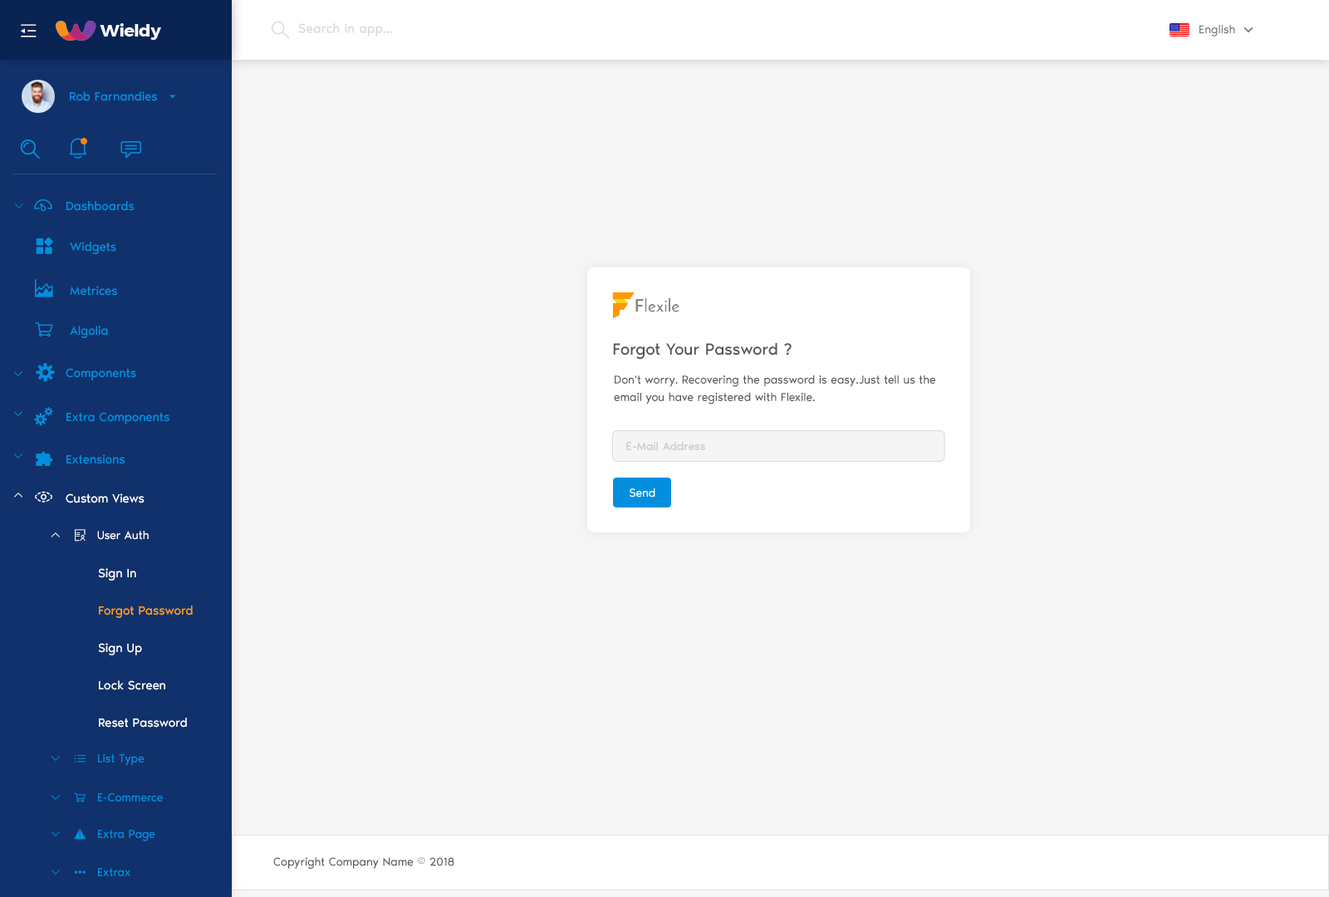
<style>
.page{position:relative;width:1329px;height:897px;background:#f6f6f6}
.page>*{position:absolute;margin:0}
.t1{font:13.3px "NoirPro-Regular";color:#d9d9d9}
.t2{font:11.6px "NoirPro-Regular";color:#757575}
.t3{font:12.5px "NoirPro-Regular";color:#038fde}
.t4{font:10px "gaxonant"}
.t5{font:18.3px "gaxonant";color:#038fde}
.t6{font:16.6px "NoirPro-Regular";color:#535353}
.t7{font:9.7px "gaxonant";color:#038fde}
.t8{font:11.6px/17.4px "NoirPro-Regular";color:#595959}
.t9{font:11.6px "NoirPro-Regular";color:#cfcfcf}
.t10{font:18.3px "gaxonant";color:#ffffff}
.t11{font:12.5px "NoirPro-Regular";color:#ffffff}
.t12{font:11.6px "NoirPro-Regular";color:#ffffff}
.t13{font:10px "gaxonant";color:#ffffff}
.t14{font:11.6px "gaxonant";color:#ffffff}
.t15{font:12.5px/33.2px "NoirPro-Regular";color:#ffffff}
.t16{font:12.5px/33.2px "NoirPro-Regular";color:#fe9e15}
.t17{font:10px "gaxonant";color:#038fde}
.t18{font:11.6px "gaxonant";color:#038fde}
.t19{font:11.6px "NoirPro-Regular";color:#038fde}
.t20{font:11.6px "NoirPro-Regular";color:#595959}
</style>
<div class="page">
<p class="t1" style="left:298px;top:23px;width:95px;height:14px">Search in app...</p>
<p class="t2" style="left:1200px;top:25px;width:35px;height:12px">English</p>
<p class="t3" style="left:70px;top:91px;width:87px;height:10px">Rob Farnandies</p>
<p class="t4" style="left:15px;top:204px;width:8px;height:5px">2</p>
<p class="t5" style="left:34px;top:199px;width:18px;height:13px">-</p>
<p class="t3" style="left:66px;top:201px;width:69px;height:10px">Dashboards</p>
<p class="t3" style="left:70px;top:242px;width:46px;height:12px">Widgets</p>
<p class="t5" style="left:35px;top:279px;width:18px;height:18px">m</p>
<p class="t3" style="left:70px;top:286px;width:47px;height:10px">Metrices</p>
<p class="t3" style="left:70px;top:326px;width:38px;height:12px">Algolia</p>
<p class="t6" style="left:613px;top:343px;width:179px;height:17px">Forgot Your Password ?</p>
<p class="t5" style="left:36px;top:363px;width:19px;height:19px">%</p>
<p class="t7" style="left:14px;top:371px;width:8px;height:5px">2</p>
<p class="t3" style="left:66px;top:368px;width:70px;height:12px">Components</p>
<p class="t8" style="left:614px;top:375px;width:321px;height:30px">Don't worry. Recovering the password is easy.Just tell us the email you have registered with Flexile.</p>
<p class="t7" style="left:14px;top:411px;width:8px;height:5px">2</p>
<p class="t3" style="left:66px;top:412px;width:103px;height:12px">Extra Components</p>
<p class="t9" style="left:626px;top:441px;width:79px;height:9px">E-Mail Address</p>
<p class="t7" style="left:14px;top:454px;width:8px;height:5px">2</p>
<p class="t3" style="left:66px;top:454px;width:59px;height:10px">Extensions</p>
<p class="t4" style="left:14px;top:493px;width:8px;height:5px">5</p>
<p class="t10" style="left:35px;top:491px;width:17px;height:12px">,</p>
<p class="t11" style="left:66px;top:493px;width:79px;height:10px">Custom Views</p>
<p class="t12" style="left:630px;top:488px;width:25px;height:10px">Send</p>
<p class="t13" style="left:51px;top:532px;width:9px;height:5px">5</p>
<p class="t14" style="left:75px;top:529px;width:11px;height:13px">r</p>
<p class="t12" style="left:97px;top:531px;width:52px;height:9px">User Auth</p>
<p class="t15" style="left:98px;top:568px;width:95px;height:160px">Sign In<br><span class="t16">Forgot Password<br></span>Sign Up<br>Lock Screen<br>Reset Password</p>
<p class="t17" style="left:52px;top:756px;width:8px;height:5px">2</p>
<p class="t18" style="left:74px;top:754px;width:12px;height:9px">h</p>
<p class="t19" style="left:98px;top:754px;width:47px;height:12px">List Type</p>
<p class="t17" style="left:52px;top:795px;width:8px;height:5px">2</p>
<p class="t19" style="left:98px;top:793px;width:65px;height:9px">E-Commerce</p>
<p class="t17" style="left:52px;top:832px;width:8px;height:5px">2</p>
<p class="t18" style="left:74px;top:829px;width:12px;height:11px">~</p>
<p class="t19" style="left:98px;top:830px;width:57px;height:12px">Extra Page</p>
<p class="t20" style="left:273px;top:857px;width:181px;height:12px">Copyright Company Name © 2018</p>
<p class="t17" style="left:52px;top:870px;width:8px;height:5px">2</p>
<p class="t19" style="left:98px;top:868px;width:32px;height:8px">Extrax</p>
<p class="t18" style="left:74px;top:871px;width:12px;height:3px">{</p>
</div>
